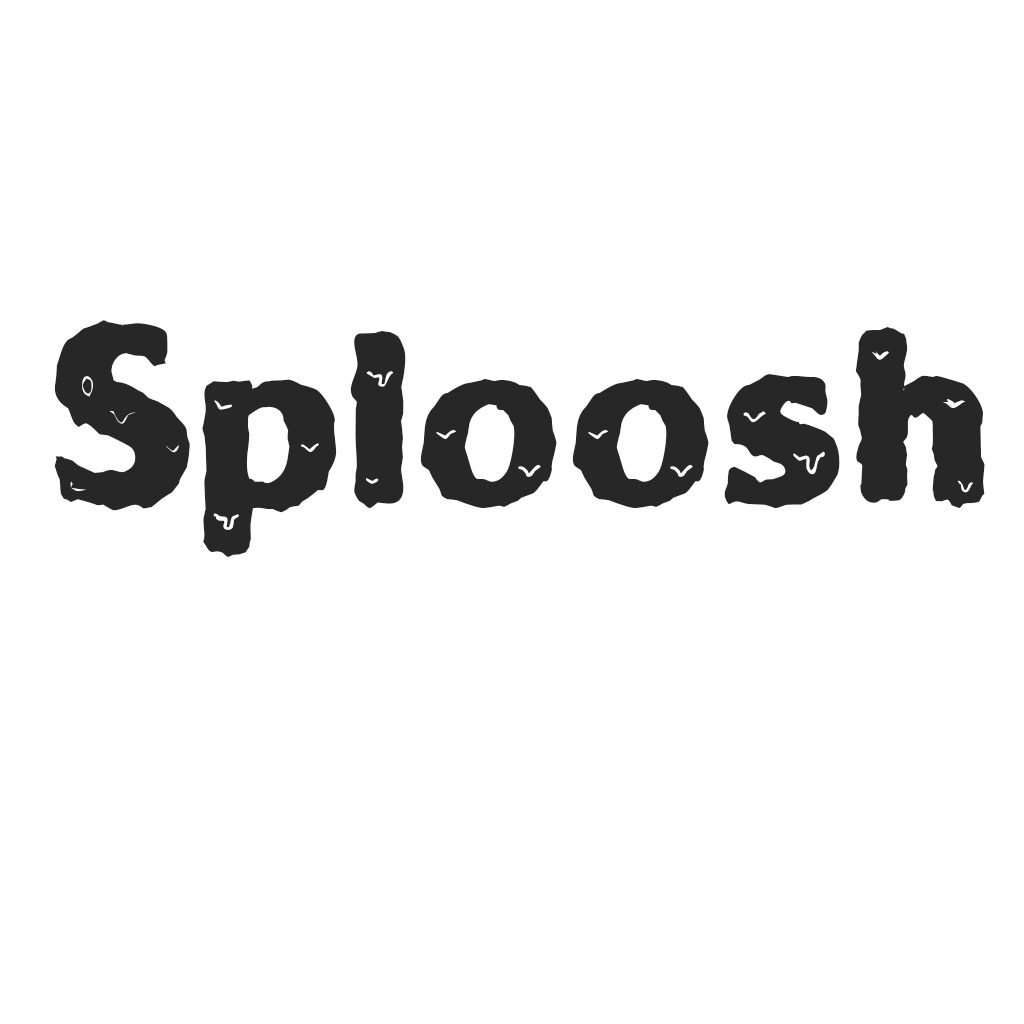
<style>
.page{position:relative;width:1024px;height:1024px;background:#ffffff}
.page>*{position:absolute;margin:0}
.t1{font:223.5px "SolidOoky";color:#272727}
</style>
<div class="page">
<p class="t1" style="left:54px;top:320px;width:931px;height:237px">Sploosh</p>
</div>
